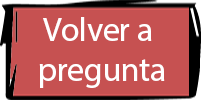
<style>
.page{position:relative;width:201px;height:100px;background:#c65151}
.page>*{position:absolute;margin:0}
.t1{font:33.3px "MyriadHebrew-Regular";color:#ffffff}
</style>
<div class="page">
<p class="t1" style="left:39px;top:17px;width:126px;height:71px;text-align:center">Volver a <br>pregunta</p>
</div>
